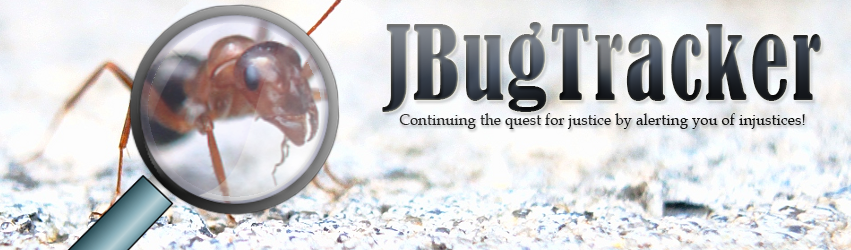
<style>
.page{position:relative;width:851px;height:250px}
.page>*{position:absolute;margin:0}
.t1{font:96.6px "BernardMT-Condensed";letter-spacing:0.02em;scale:0.9 1}
.t2{font:16.1px "BookAntiqua";letter-spacing:0.02em;color:#1b1b1b;scale:0.9 1}
</style>
<div class="page">
<p class="t1" style="left:382px;top:22px;width:439px;height:90px">JBugTracker</p>
<p class="t2" style="left:399px;top:113px;width:406px;height:16px">Continuing the quest for justice by alerting you of injustices!</p>
</div>
